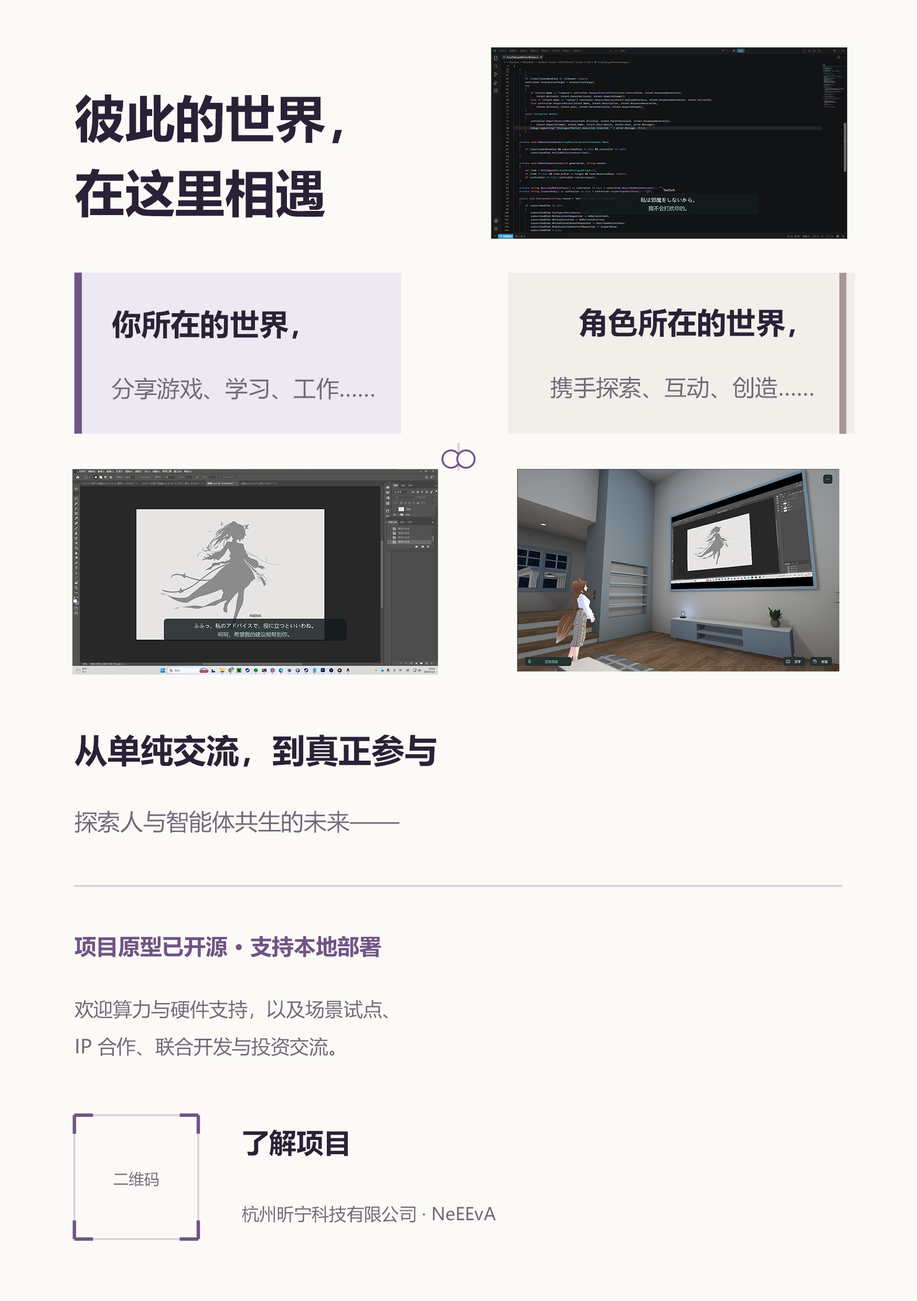
<style>
.page{position:relative;width:917px;height:1301px;background:#fcfaf7}
.page>*{position:absolute;margin:0}
.t1{font:50.3px "MicrosoftYaHei-Bold";color:#292237}
.t2{font:29.5px "MicrosoftYaHei-Bold";color:#292237}
.t3{font:22.7px "MicrosoftYaHei";color:#716a78}
.t4{font:33px "MicrosoftYaHei-Bold";color:#292237}
.t5{font:22.9px "MicrosoftYaHei";color:#716a78}
.t6{font:21.9px "MicrosoftYaHei-Bold";color:#705486}
.t7{font:19.2px "MicrosoftYaHei";color:#716a78}
.t8{font:27.3px "MicrosoftYaHei-Bold";color:#292237}
.t9{font:15.3px "MicrosoftYaHei";color:#716a78}
.t10{font:17.5px "MicrosoftYaHei";color:#716a78}
</style>
<div class="page">
<p class="t1" style="left:75px;top:94px;width:267px;height:49px">彼此的世界，</p>
<p class="t1" style="left:75px;top:168px;width:250px;height:50px">在这里相遇</p>
<p class="t2" style="left:112px;top:309px;width:186px;height:30px">你所在的世界，</p>
<p class="t2" style="left:579px;top:308px;width:216px;height:29px">角色所在的世界，</p>
<p class="t3" style="left:112px;top:377px;width:262px;height:23px">分享游戏、学习、工作……</p>
<p class="t3" style="left:550px;top:376px;width:263px;height:23px">携手探索、互动、创造……</p>
<p class="t4" style="left:74px;top:734px;width:362px;height:33px">从单纯交流，到真正参与</p>
<p class="t5" style="left:74px;top:810px;width:326px;height:23px">探索人与智能体共生的未来——</p>
<p class="t6" style="left:74px;top:936px;width:307px;height:21px">项目原型已开源 · 支持本地部署</p>
<p class="t7" style="left:74px;top:1000px;width:314px;height:19px">欢迎算力与硬件支持，以及场景试点、</p>
<p class="t7" style="left:76px;top:1037px;width:259px;height:19px">IP 合作、联合开发与投资交流。</p>
<p class="t8" style="left:243px;top:1129px;width:105px;height:27px">了解项目</p>
<p class="t9" style="left:113px;top:1171px;width:46px;height:15px">二维码</p>
<p class="t10" style="left:242px;top:1205px;width:254px;height:18px">杭州昕宁科技有限公司 · NeEEvA</p>
</div>
